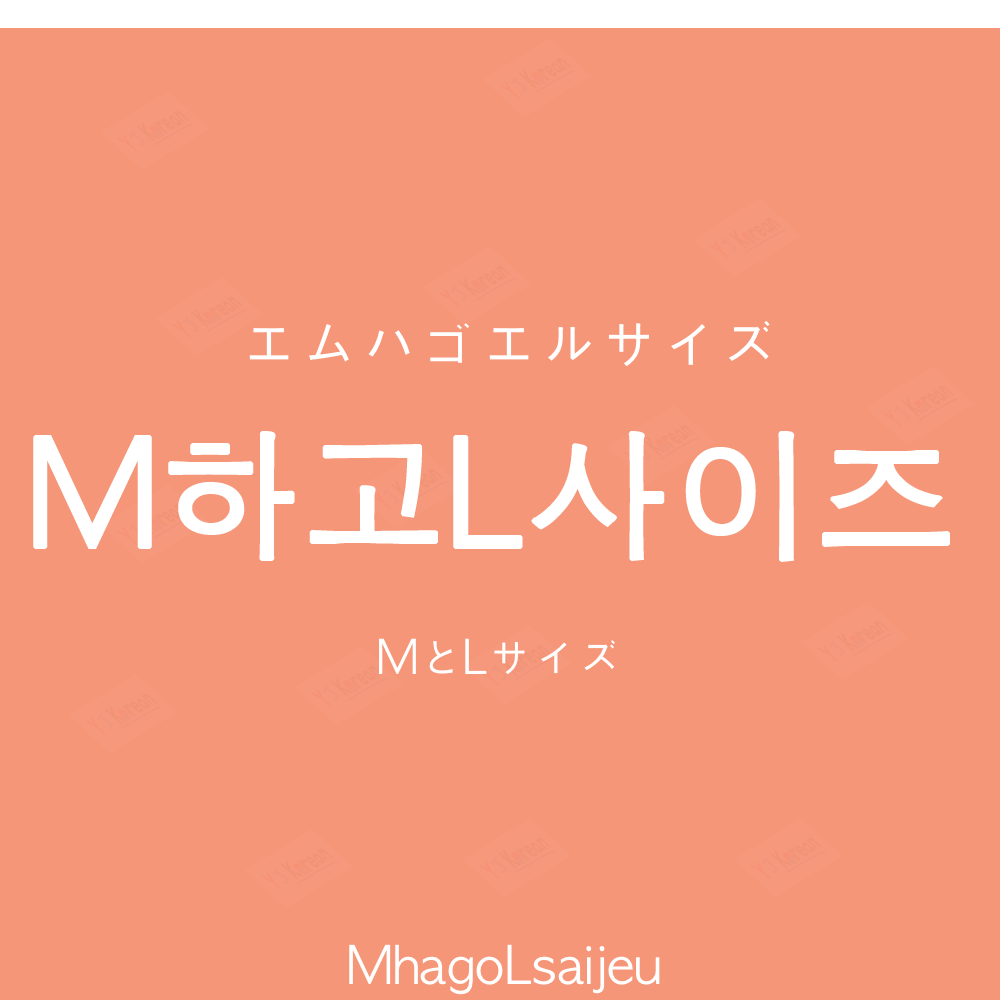
<style>
.page{position:relative;width:1000px;height:1000px;background:#f69679}
.page>*{position:absolute;margin:0}
.t1{font:60px "AppleGothic";color:#ffffff}
.t2{font:140px "AppleGothic";color:#ffffff;font-weight:bold}
.t3{font:45px "AppleGothic";color:#ffffff}
.t4{font:50px "AppleGothic";color:#ffffff}
</style>
<div class="page">
<p class="t1" style="left:249px;top:321px;width:521px;height:46px">エムハゴエルサイズ</p>
<p class="t2" style="left:33px;top:431px;width:917px;height:131px">M하고L사이즈</p>
<p class="t3" style="left:379px;top:638px;width:236px;height:36px">MとLサイズ</p>
<p class="t4" style="left:349px;top:944px;width:311px;height:51px">MhagoLsaijeu</p>
</div>
